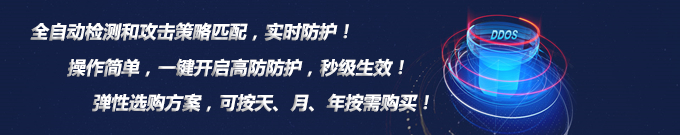
<style>
.page{position:relative;width:680px;height:135px}
.page>*{position:absolute;margin:0}
.t1{font:18px "MicrosoftYaHei-Bold";color:#ffffff;font-style:italic}
</style>
<div class="page">
<p class="t1" style="left:30px;top:22px;width:319px;height:19px">全自动检测和攻击策略匹配，实时防护！</p>
<p class="t1" style="left:67px;top:58px;width:337px;height:19px">操作简单，一键开启高防防护，秒级生效！</p>
<p class="t1" style="left:92px;top:93px;width:337px;height:19px">弹性选购方案，可按天、月、年按需购买！</p>
</div>
